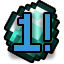
<style>
.page{position:relative;width:64px;height:64px;background:#ffffff}
.page>*{position:absolute;margin:0}
.t1{font:41.7px "Minecraftia-Regular";color:#3498db}
</style>
<div class="page">
<p class="t1" style="left:14px;top:14px;width:36px;height:37px">1!</p>
</div>
